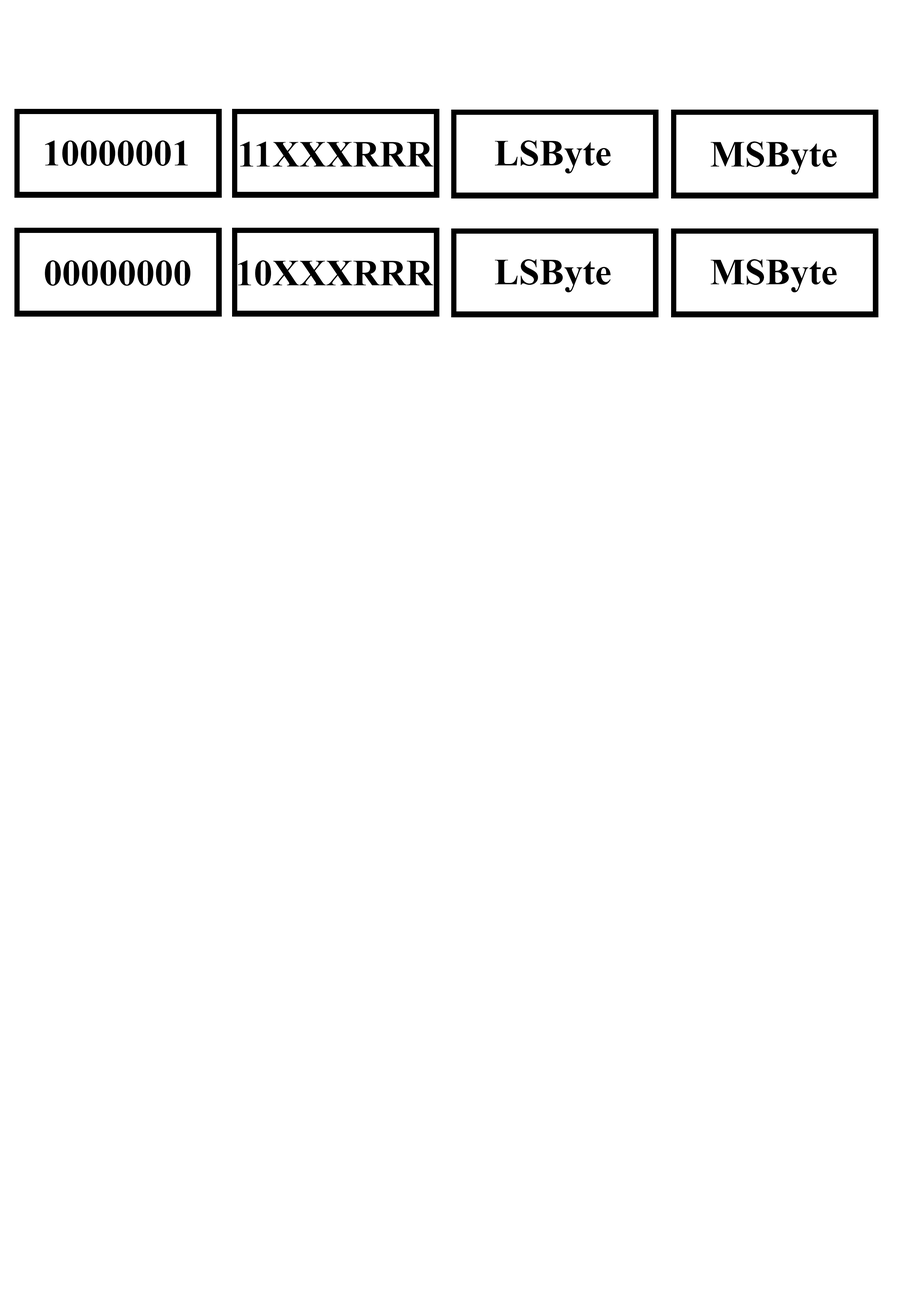
<style>
.page{position:relative;width:918px;height:1299px;background:#ffffff}
.page>*{position:absolute;margin:0}
.t1{font:37px "TimesNewRomanPS-BoldMT";color:#000000}
</style>
<div class="page">
<p class="t1" style="left:45px;top:140px;width:143px;height:26px">10000001</p>
<p class="t1" style="left:240px;top:141px;width:194px;height:26px">11XXXRRR</p>
<p class="t1" style="left:495px;top:140px;width:116px;height:34px">LSByte</p>
<p class="t1" style="left:711px;top:141px;width:126px;height:34px">MSByte</p>
<p class="t1" style="left:45px;top:260px;width:146px;height:26px">00000000</p>
<p class="t1" style="left:238px;top:260px;width:196px;height:26px">10XXXRRR</p>
<p class="t1" style="left:495px;top:259px;width:116px;height:33px">LSByte</p>
<p class="t1" style="left:711px;top:259px;width:126px;height:33px">MSByte</p>
</div>
